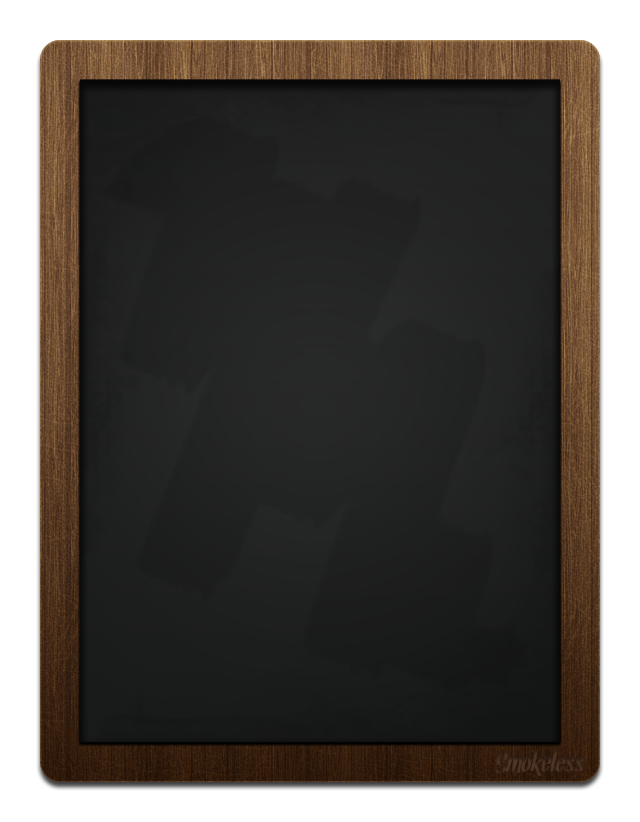
<style>
.page{position:relative;width:640px;height:822px}
.page>*{position:absolute;margin:0}
.t1{font:30px "Snickles";color:#533b2b}
</style>
<div class="page">
<p class="t1" style="left:494px;top:749px;width:91px;height:28px">Smokeless</p>
</div>
